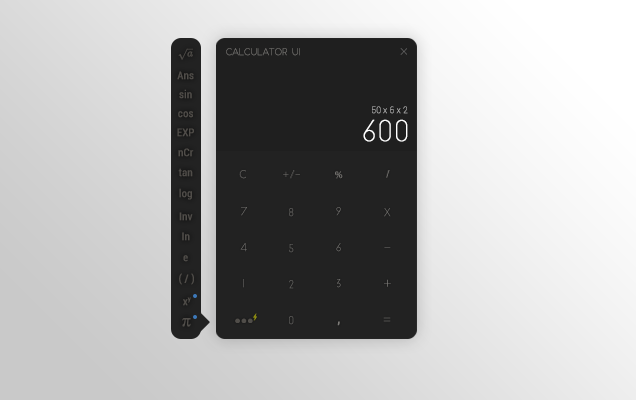
<style>
.page{position:relative;width:636px;height:400px}
.page>*{position:absolute;margin:0}
.t1{font:8.9px "SlimJoe";font-weight:bold;scale:0.94 1}
.t2{font:10.7px "Roboto-Condensed";color:#504d49;font-weight:bold}
.t3{font:8.9px "Roboto-Thin";font-weight:bold;scale:0.94 1}
.t4{font:28.5px "SlimJoe";color:#ffffff;font-weight:bold;scale:0.94 1}
.t5{font:10.7px "SlimJoe";font-weight:bold;scale:0.94 1}
.t6{font:14.2px "SlimJoe";font-weight:bold;scale:0.94 1}
.t7{font:16px "SlimJoe";font-weight:bold;scale:0.94 1}
.t8{font:14.2px "Roboto-Condensed";color:#7d7b78;font-weight:bold;scale:0.94 1}
</style>
<div class="page">
<p class="t1" style="left:226px;top:48px;width:74px;height:8px">Calculator UI</p>
<p class="t2" style="left:177px;top:71px;width:17px;height:9px">Ans</p>
<p class="t2" style="left:179px;top:89px;width:13px;height:10px">sin</p>
<p class="t2" style="left:178px;top:111px;width:15px;height:7px">cos</p>
<p class="t3" style="left:372px;top:106px;width:36px;height:8px">50 x 6 x 2</p>
<p class="t4" style="left:363px;top:119px;width:45px;height:23px">600</p>
<p class="t2" style="left:177px;top:128px;width:17px;height:9px">EXP</p>
<p class="t2" style="left:178px;top:148px;width:16px;height:9px">nCr</p>
<p class="t2" style="left:178px;top:168px;width:15px;height:9px">tan</p>
<p class="t2" style="left:179px;top:188px;width:13px;height:12px">log</p>
<p class="t5" style="left:241px;top:207px;width:6px;height:9px">7</p>
<p class="t5" style="left:289px;top:208px;width:5px;height:9px">8</p>
<p class="t5" style="left:336px;top:207px;width:5px;height:9px">9</p>
<p class="t5" style="left:384px;top:208px;width:7px;height:9px">X</p>
<p class="t2" style="left:179px;top:212px;width:14px;height:9px">Inv</p>
<p class="t2" style="left:182px;top:232px;width:8px;height:9px">In</p>
<p class="t5" style="left:240px;top:243px;width:7px;height:9px">4</p>
<p class="t5" style="left:289px;top:244px;width:5px;height:9px">5</p>
<p class="t5" style="left:336px;top:243px;width:5px;height:9px">6</p>
<p class="t2" style="left:183px;top:255px;width:5px;height:7px">e</p>
<p class="t6" style="left:384px;top:247px;width:7px;height:1px">-</p>
<p class="t2" style="left:179px;top:273px;width:15px;height:12px">( / )</p>
<p class="t5" style="left:243px;top:279px;width:1px;height:9px">1</p>
<p class="t5" style="left:289px;top:280px;width:5px;height:9px">2</p>
<p class="t5" style="left:337px;top:279px;width:4px;height:9px">3</p>
<p class="t6" style="left:384px;top:279px;width:7px;height:8px">+</p>
<p class="t2" style="left:183px;top:297px;width:8px;height:9px">xy</p>
<p class="t5" style="left:289px;top:316px;width:5px;height:9px">0</p>
<p class="t7" style="left:383px;top:317px;width:8px;height:5px">=</p>
<p class="t8" style="left:337px;top:321px;width:3px;height:5px">,</p>
</div>
